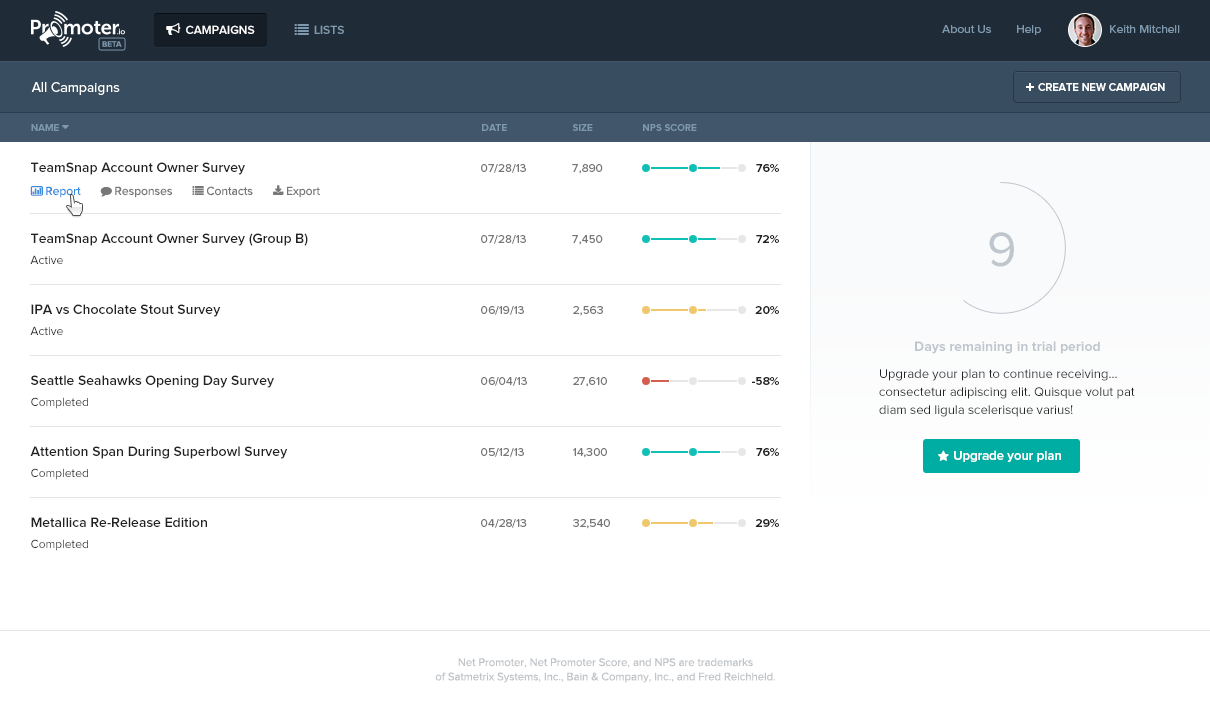
<style>
.page{position:relative;width:1210px;height:713px;background:#ffffff}
.page>*{position:absolute;margin:0}
.t1{font:12px "ProximaNova-Regular";color:#7e98ad}
.t2{font:8px "ProximaNova-Semibold";color:#7e98ad;text-transform:uppercase}
.t3{font:14px "ProximaNova-Regular";color:#ffffff}
.t4{font:11px "ProximaNova-Semibold";color:#ffffff;text-transform:uppercase}
.t5{font:10px "ProximaNova-Semibold";color:#7e98ad;text-transform:uppercase}
.t6{font:14px/32px "ProximaNova-Semibold";color:#222222}
.t7{font:14px/21px "ProximaNova-Semibold";color:#222222}
.t8{font:12px/21px "ProximaNova-Regular";color:#222222}
.t9{font:12px/50px "ProximaNova-Regular";color:#777777}
.t10{font:12px/21px "ProximaNova-Regular";color:#777777}
.t11{font:12px/50px "ProximaNova-Semibold";color:#222222}
.t12{font:12px/21px "ProximaNova-Semibold";color:#222222}
.t13{font:50px "ProximaNova-Regular";letter-spacing:-0.02em;color:#bfc6cd;text-transform:uppercase}
.t14{font:14px "ProximaNova-Bold";color:#bfc6cd}
.t15{font:13px/18px "ProximaNova-Regular";color:#222222}
.t16{font:11.3px/14.4px "ProximaNova-Regular";color:#c1c4c8}
</style>
<div class="page">
<p class="t1" style="left:942px;top:25px;width:238px;height:10px">About Us        Help                      Keith Mitchell</p>
<p class="t2" style="left:102px;top:41px;width:20px;height:6px">beta</p>
<p class="t3" style="left:31px;top:82px;width:89px;height:13px">All Campaigns</p>
<p class="t4" style="left:1038px;top:83px;width:127px;height:8px">Create New Campaign</p>
<p class="t5" style="left:482px;top:124px;width:25px;height:7px">date</p>
<p class="t5" style="left:572px;top:124px;width:21px;height:7px">size</p>
<p class="t5" style="left:643px;top:124px;width:54px;height:7px">NPS score</p>
<p class="t6" style="left:30px;top:162px;width:278px;height:389px"><span class="t7">TeamSnap Account Owner Survey<br><br><br></span>TeamSnap Account Owner Survey (Group B)<br><span class="t8">Active<br><br></span>IPA vs Chocolate Stout Survey<br><span class="t8">Active<br><br></span>Seattle Seahawks Opening Day Survey<br><span class="t8">Completed<br><br></span>Attention Span During Superbowl Survey<br><span class="t8">Completed<br><br></span>Metallica Re-Release Edition<br><span class="t8">Completed</span></p>
<p class="t9" style="left:481px;top:164px;width:46px;height:364px"><span class="t10">07/28/13<br><br></span>07/28/13<br><br>06/19/13<br><br>06/04/13<br><br>05/12/13<br><br>04/28/13</p>
<p class="t9" style="left:572px;top:164px;width:38px;height:365px"><span class="t10">7,890<br><br></span>7,450<br><br>2,563<br><br>27,610<br><br>14,300<br><br>32,540</p>
<p class="t11" style="left:752px;top:164px;width:27px;height:363px;text-align:right"><span class="t12">76%<br><br></span>72%<br><br>20%<br><br>-58%<br><br>76%<br><br>29%</p>
<p class="t13" style="left:989px;top:232px;width:25px;height:35px">9</p>
<p class="t14" style="left:915px;top:341px;width:185px;height:13px">Days remaining in trial period</p>
<p class="t15" style="left:879px;top:369px;width:256px;height:48px">Upgrade your plan to continue receiving... consectetur adipiscing elit. Quisque volut pat diam sed ligula scelerisque varius! <br>Vestibulum fringilla lorem!</p>
<p class="t16" style="left:435px;top:658px;width:341px;height:25px;text-align:center">Net Promoter, Net Promoter Score, and NPS are trademarks<br>of Satmetrix Systems, Inc., Bain &amp; Company, Inc., and Fred Reichheld.</p>
</div>
